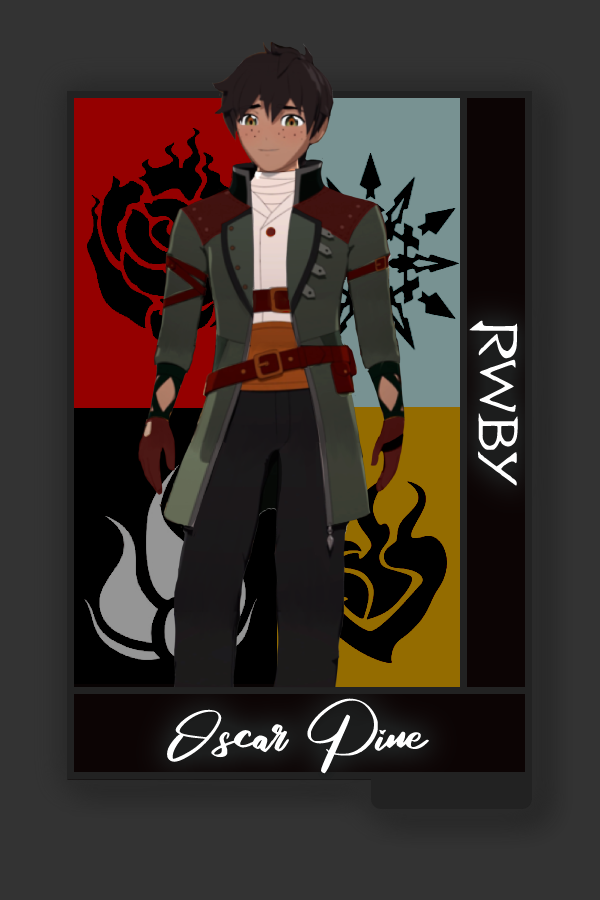
<style>
.page{position:relative;width:600px;height:900px;background:#333333}
.page>*{position:absolute;margin:0}
.t1{font:61.3px "RWBY_Style";color:#ffffff;scale:1.25 1}
.t2{font:76.6px "RosegaFREE";color:#ffffff;scale:0.91 1}
</style>
<div class="page">
<p class="t1" style="left:469px;top:320px;width:49px;height:166px;rotate:90deg">RWBY</p>
<p class="t2" style="left:166px;top:698px;width:264px;height:76px">Oscar Pine</p>
</div>
